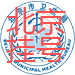
<style>
.page{position:relative;width:75px;height:75px;background:#ffffff}
.page>*{position:absolute;margin:0}
.t1{font:30px/28px "MicrosoftYaHei";color:#ff4f4f}
</style>
<div class="page">
<p class="t1" style="left:6px;top:7px;width:60px;height:56px">北京<br>挂号</p>
</div>
